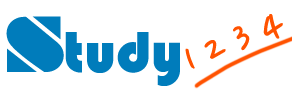
<style>
.page{position:relative;width:292px;height:96px;background:#ffffff}
.page>*{position:absolute;margin:0}
.t1{font:60px "Bauhaus93";color:#007cbb}
.t2{font:72px "Braggadocio";color:#007cbb}
</style>
<div class="page">
<p class="t1" style="left:6px;top:16px;width:174px;height:70px"><span class="t2">S</span>tudy</p>
</div>
